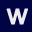
<style>
.page{position:relative;width:32px;height:32px;background:#000444}
.page>*{position:absolute;margin:0}
.t1{font:28.8px "ArialMT";letter-spacing:0.05em;color:#ebebeb;font-weight:bold}
</style>
<div class="page">
<p class="t1" style="left:6px;top:8px;width:22px;height:17px">w</p>
</div>
